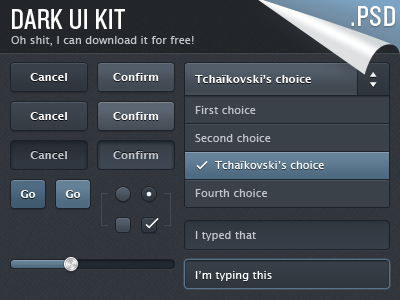
<style>
.page{position:relative;width:400px;height:300px}
.page>*{position:absolute;margin:0}
.t1{font:11px "LucidaGrande-Bold";color:#ffffff}
.t2{font:11px "LucidaGrande";color:#c1c6cb}
.t3{font:11px "LucidaGrande-Bold";color:#c1c6cb}
.t4{font:11px "LucidaGrande";color:#ffffff}
</style>
<div class="page">
<p class="t1" style="left:30px;top:73px;width:37px;height:8px">Cancel</p>
<p class="t1" style="left:113px;top:73px;width:46px;height:8px">Confirm</p>
<p class="t1" style="left:195px;top:75px;width:116px;height:8px">Tchaïkovski’s choice</p>
<p class="t1" style="left:30px;top:112px;width:37px;height:8px">Cancel</p>
<p class="t1" style="left:113px;top:112px;width:46px;height:8px">Confirm</p>
<p class="t2" style="left:195px;top:106px;width:61px;height:8px">First choice</p>
<p class="t2" style="left:195px;top:134px;width:76px;height:8px">Second choice</p>
<p class="t3" style="left:30px;top:151px;width:37px;height:8px">Cancel</p>
<p class="t3" style="left:113px;top:151px;width:46px;height:8px">Confirm</p>
<p class="t4" style="left:215px;top:161px;width:109px;height:8px">Tchaïkovski’s choice</p>
<p class="t1" style="left:20px;top:190px;width:16px;height:8px">Go</p>
<p class="t1" style="left:65px;top:190px;width:16px;height:8px">Go</p>
<p class="t2" style="left:195px;top:189px;width:72px;height:8px">Fourth choice</p>
<p class="t2" style="left:195px;top:231px;width:61px;height:10px">I typed that</p>
<p class="t4" style="left:195px;top:271px;width:77px;height:10px">I’m typing this</p>
</div>
